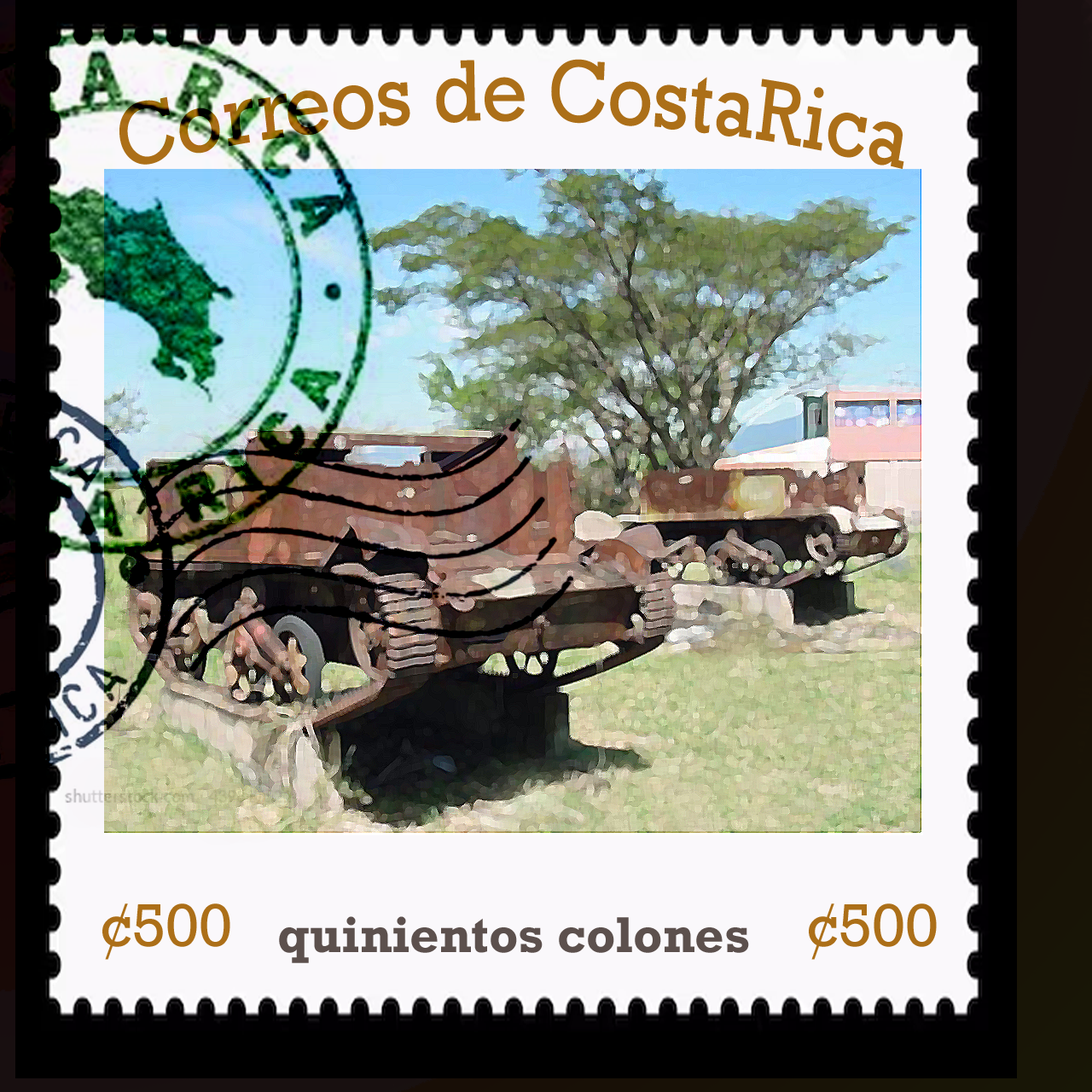
<style>
.page{position:relative;width:1092px;height:1092px}
.page>*{position:absolute;margin:0}
.t1{font:88.4px "Rockwell";color:#ac6f18;scale:0.83 1}
.t2{font:61.4px "Rockwell";color:#ac6f18}
.t3{font:51.2px "Rockwell-Bold";color:#5c504d}
</style>
<div class="page">
<p class="t1" style="left:119px;top:59px;width:785px;height:110px">Correos de CostaRica</p>
<p class="t2" style="left:102px;top:903px;width:128px;height:57px">¢500</p>
<p class="t2" style="left:809px;top:903px;width:128px;height:57px">¢500</p>
<p class="t3" style="left:279px;top:916px;width:470px;height:47px">quinientos colones</p>
</div>
